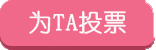
<style>
.page{position:relative;width:156px;height:50px;background:#f1698a}
.page>*{position:absolute;margin:0}
.t1{font:24px "YouYuan";color:#f9f8f8;font-weight:bold}
</style>
<div class="page">
<p class="t1" style="left:29px;top:10px;width:97px;height:24px">为TA投票</p>
</div>
